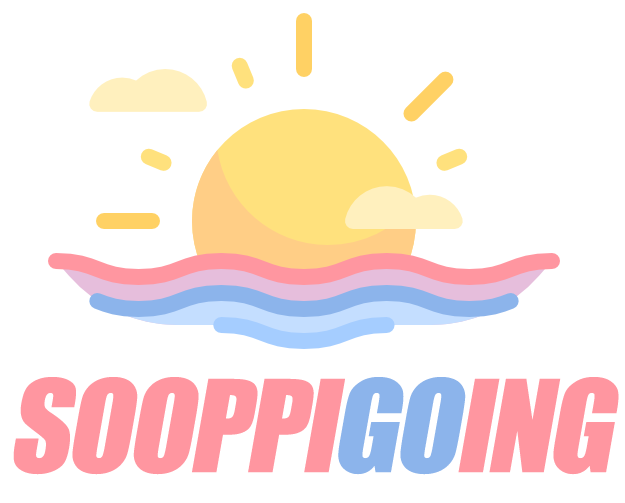
<style>
.page{position:relative;width:625px;height:503px;background:#ffffff}
.page>*{position:absolute;margin:0}
.t1{font:117.7px "Impact";letter-spacing:-0.025em;color:#ff96a0;text-transform:uppercase;font-style:italic}
.t2{font:117.7px "Impact";letter-spacing:-0.025em;color:#8cb4eb;text-transform:uppercase;font-style:italic}
</style>
<div class="page">
<p class="t1" style="left:13px;top:377px;width:606px;height:98px">sooppi<span class="t2">go</span>ing</p>
</div>
